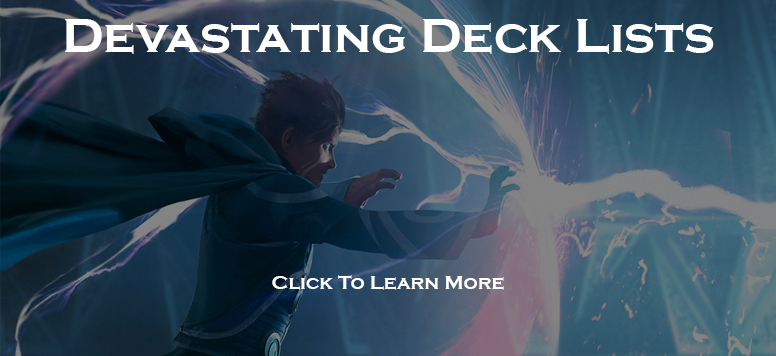
<style>
.page{position:relative;width:776px;height:356px}
.page>*{position:absolute;margin:0}
.t1{font:50px "CopperplateGothic-Bold";color:#ffffff}
.t2{font:20px "CopperplateGothic-Bold";color:#ffffff}
</style>
<div class="page">
<p class="t1" style="left:65px;top:19px;width:649px;height:35px">Devastating Deck Lists</p>
<p class="t2" style="left:272px;top:275px;width:232px;height:15px">Click To Learn More</p>
</div>
